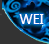
<style>
.page{position:relative;width:49px;height:44px;background:#333333}
.page>*{position:absolute;margin:0}
.t1{font:14px "LaoUI";color:#ffffff}
</style>
<div class="page">
<p class="t1" style="left:19px;top:14px;width:25px;height:10px">WEI</p>
</div>
